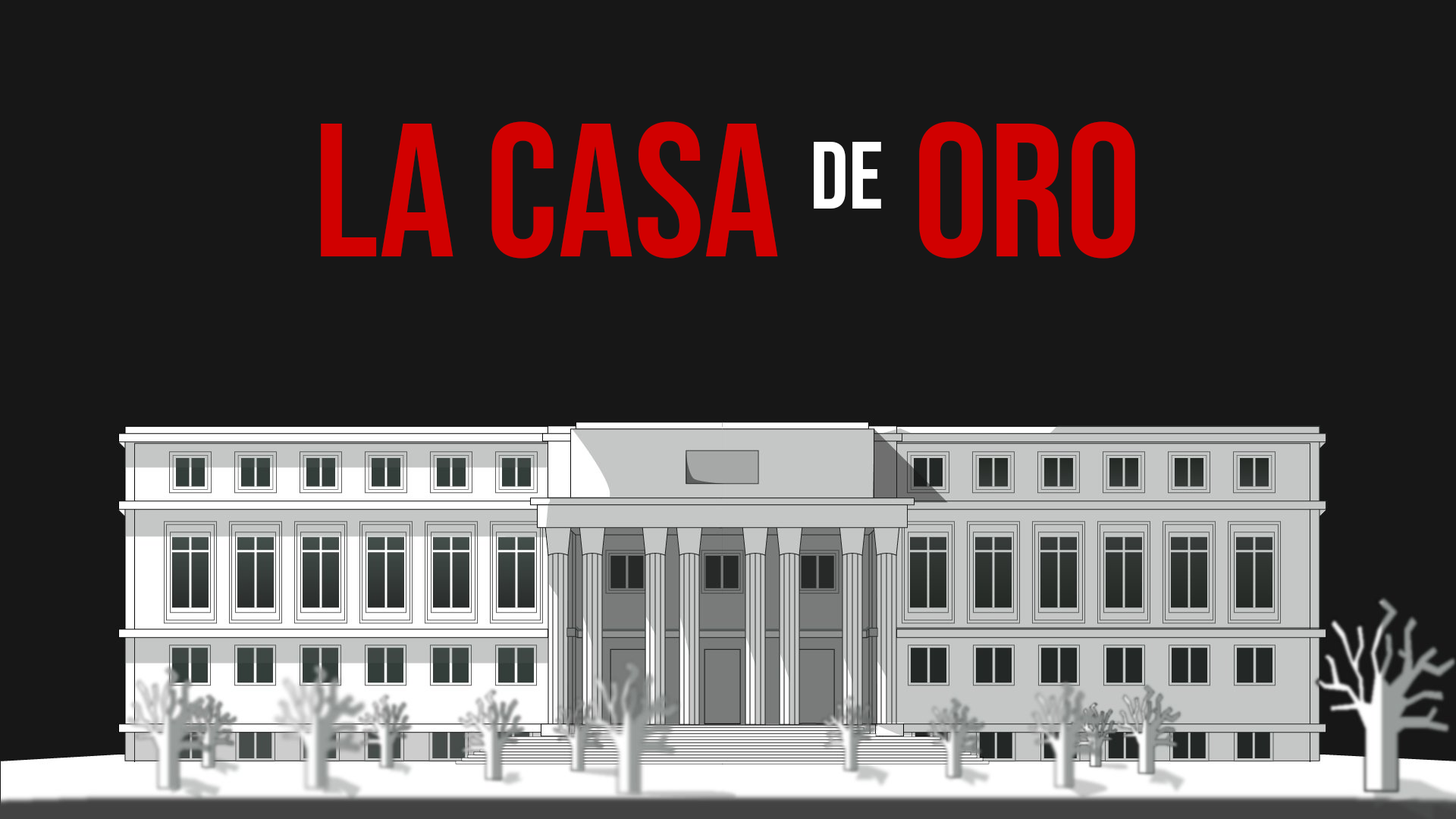
<style>
.page{position:relative;width:1456px;height:819px;background:#171717}
.page>*{position:absolute;margin:0}
.t1{font:189.6px "BebasNeue-Regular";color:#d10000}
.t2{font:94.8px "BebasNeue-Regular";color:#ffffff}
</style>
<div class="page">
<p class="t1" style="left:321px;top:121px;width:814px;height:138px">LA Casa <span class="t2">de </span>Oro</p>
</div>
